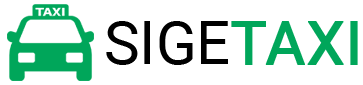
<style>
.page{position:relative;width:363px;height:85px;background:#ffffff}
.page>*{position:absolute;margin:0}
.t1{font:60px "Roboto-Regular";color:#000000;text-transform:uppercase}
.t2{font:60px "Roboto-Regular";color:#00a65a;text-transform:uppercase;font-weight:bold}
</style>
<div class="page">
<p class="t1" style="left:106px;top:21px;width:252px;height:44px">Sige<span class="t2">Taxi</span></p>
</div>
